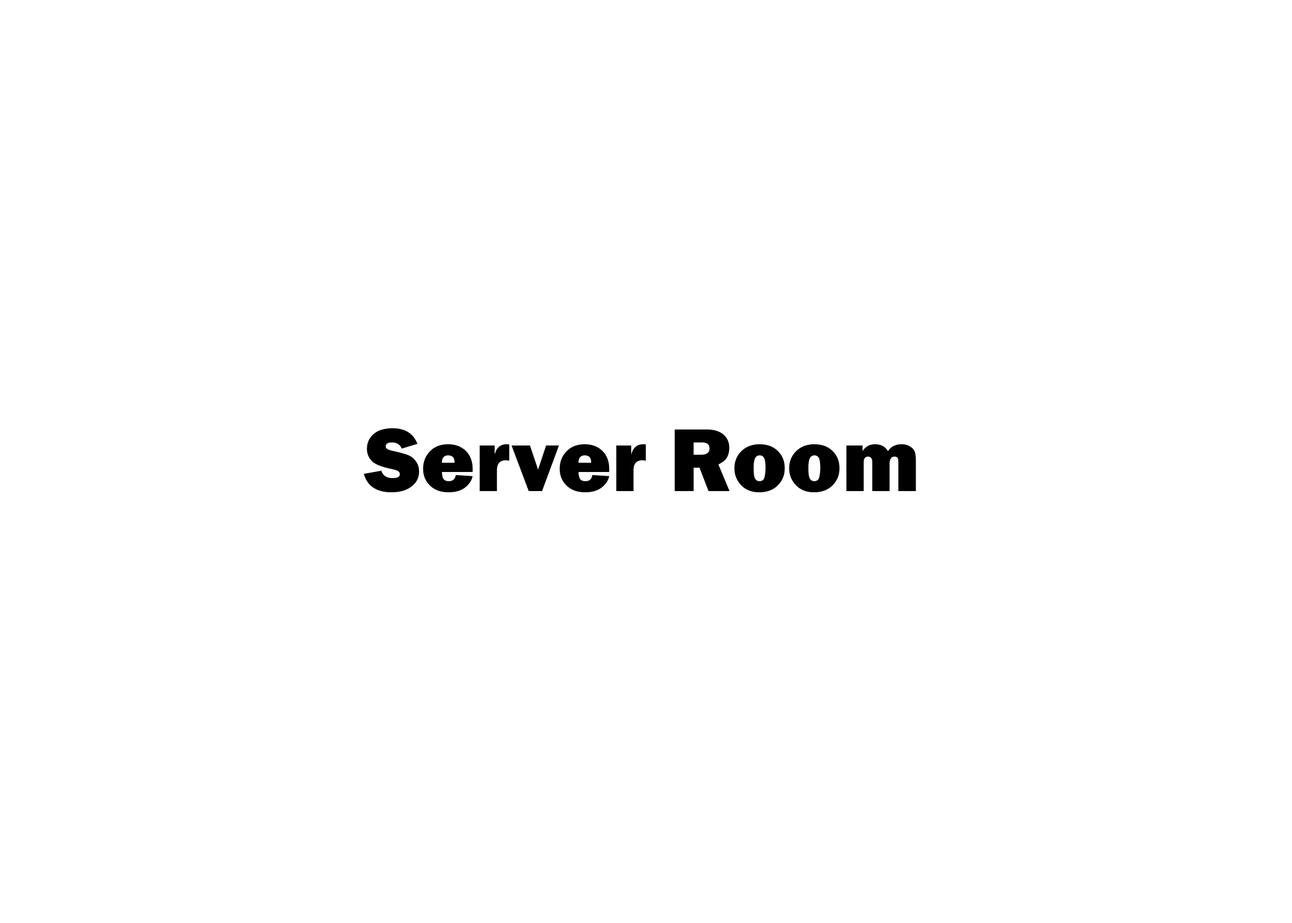
<style>
.page{position:relative;width:1292px;height:923px;background:#ffffff}
.page>*{position:absolute;margin:0}
.t1{font:92.3px "FranklinGothic-Heavy";color:#000000}
</style>
<div class="page">
<p class="t1" style="left:364px;top:428px;width:552px;height:64px">Server Room</p>
</div>
